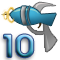
<style>
.page{position:relative;width:60px;height:60px;background:#ffffff}
.page>*{position:absolute;margin:0}
.t1{font:29.8px "BlippoLightSF";letter-spacing:-0.1em;font-weight:bold;scale:1.08 1}
</style>
<div class="page">
<p class="t1" style="left:4px;top:34px;width:30px;height:24px">10</p>
</div>
